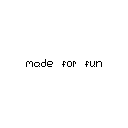
<style>
.page{position:relative;width:128px;height:128px;background:#ffffff}
.page>*{position:absolute;margin:0}
.t1{font:10px "Pixel_3";color:#000000;scale:1.17 1}
</style>
<div class="page">
<p class="t1" style="left:26px;top:59px;width:76px;height:8px">made for fun</p>
</div>
